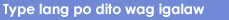
<style>
.page{position:relative;width:229px;height:20px;background:#7289d5}
.page>*{position:absolute;margin:0}
.t1{font:14px "CenturyGothic-Bold";color:#ffffff}
</style>
<div class="page">
<p class="t1" style="left:3px;top:3px;width:201px;height:14px">Type lang po dito wag igalaw</p>
</div>
